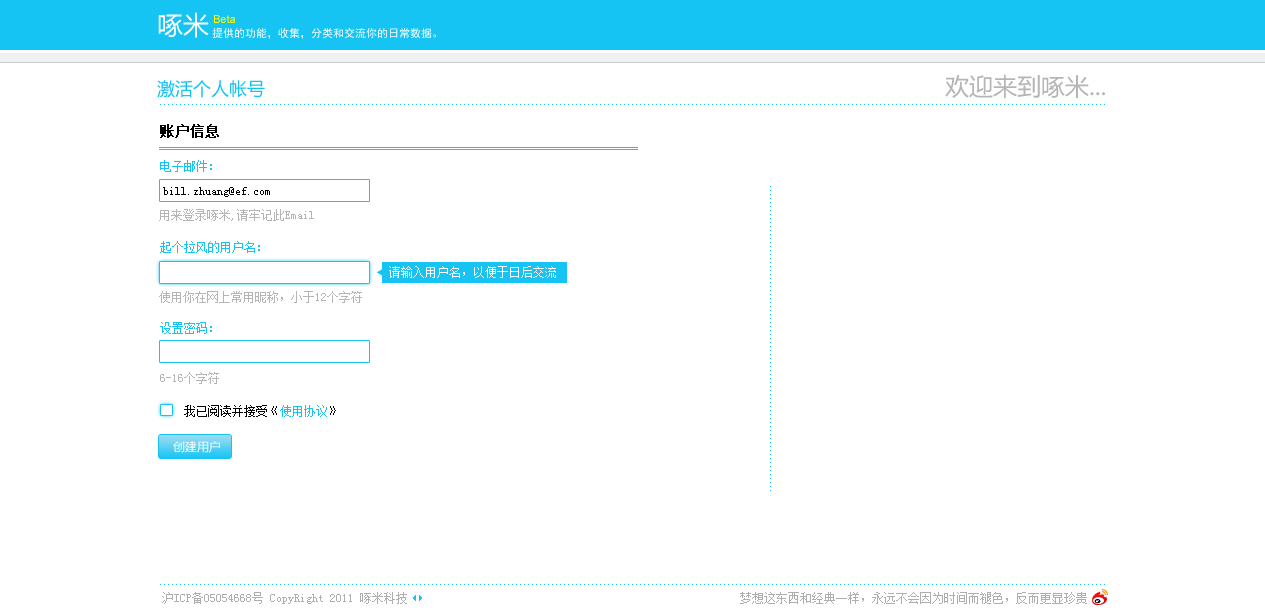
<style>
.page{position:relative;width:1265px;height:610px;background:#ffffff}
.page>*{position:absolute;margin:0}
.t1{font:26px "MicrosoftYaHei";color:#ffffff}
.t2{font:11px "ArialMT";color:#fffc04}
.t3{font:11px "SimHei";color:#ffffff}
.t4{font:24px "MicrosoftYaHei";color:#b5b5b5}
.t5{font:18px "MicrosoftYaHei";color:#16c4f3}
.t6{font:14px "NSimSun";color:#000000;font-weight:bold}
.t7{font:12px "NSimSun";color:#16c4f3}
.t8{font:12px "NSimSun";color:#000000}
.t9{font:12px "NSimSun";color:#b5b5b5}
.t10{font:12px "NSimSun";color:#ffffff}
.t11{font:12px "MicrosoftYaHei";color:#ffffff}
.t12{font:12px "NSimSun";color:#aeaeae}
</style>
<div class="page">
<p class="t1" style="left:158px;top:12px;width:51px;height:26px">啄米</p>
<p class="t2" style="left:214px;top:15px;width:21px;height:8px">Beta</p>
<p class="t3" style="left:212px;top:28px;width:224px;height:11px">提供的功能，收集，分类和交流你的日常数据。</p>
<p class="t4" style="left:945px;top:74px;width:160px;height:25px">欢迎来到啄米...</p>
<p class="t5" style="left:157px;top:80px;width:108px;height:18px">激活个人帐号</p>
<p class="t6" style="left:160px;top:124px;width:59px;height:14px">账户信息</p>
<p class="t7" style="left:160px;top:160px;width:52px;height:12px">电子邮件：</p>
<p class="t8" style="left:163px;top:187px;width:107px;height:10px">bill.zhuang@ef.com</p>
<p class="t9" style="left:159px;top:209px;width:155px;height:12px">用来登录啄米,请牢记此Email</p>
<p class="t7" style="left:160px;top:241px;width:100px;height:12px">起个拉风的用户名：</p>
<p class="t10" style="left:389px;top:266px;width:167px;height:12px">请输入用户名，以便于日后交流</p>
<p class="t9" style="left:159px;top:291px;width:203px;height:12px">使用你在网上常用昵称，小于12个字符</p>
<p class="t7" style="left:160px;top:322px;width:52px;height:12px">设置密码：</p>
<p class="t9" style="left:160px;top:372px;width:59px;height:12px">6-16个字符</p>
<p class="t8" style="left:184px;top:405px;width:152px;height:12px">我已阅读并接受《<span class="t7">使用协议</span>》</p>
<p class="t11" style="left:173px;top:441px;width:47px;height:12px">创建用户</p>
<p class="t12" style="left:162px;top:592px;width:245px;height:12px">沪ICP备05054668号 CopyRight 2011 啄米科技</p>
<p class="t12" style="left:740px;top:592px;width:347px;height:12px">梦想这东西和经典一样，永远不会因为时间而褪色，反而更显珍贵</p>
</div>
